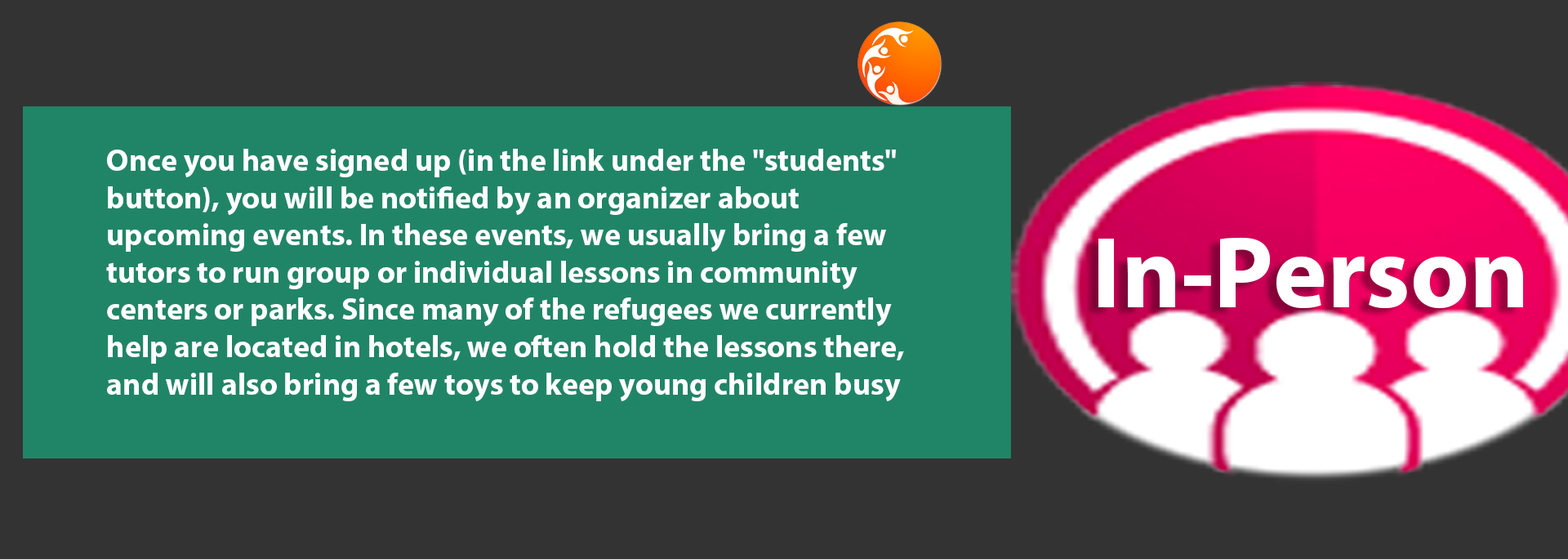
<style>
.page{position:relative;width:1568px;height:559px;background:#333333}
.page>*{position:absolute;margin:0}
.t1{font:31px "MyriadPro-Bold";color:#ffffff}
.t2{font:102.1px "MyriadPro-Bold";color:#ffffff}
</style>
<div class="page">
<p class="t1" style="left:106px;top:149px;width:798px;height:252px">Once you have signed up (in the link under the "students" button), you will be notified by an organizer about upcoming events. In these events, we usually bring a few tutors to run group or individual lessons in community centers or parks. Since many of the refugees we currently help are located in hotels, we often hold the lessons there, and will also bring a few toys to keep young children busy while others learn.</p>
<p class="t2" style="left:1098px;top:237px;width:425px;height:72px">In-Person</p>
</div>
